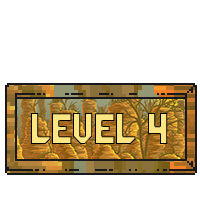
<style>
.page{position:relative;width:200px;height:200px;background:#ffffff}
.page>*{position:absolute;margin:0}
.t1{font:34.9px "GalacticaGridRegular";color:#fce583;scale:0.97 1}
</style>
<div class="page">
<p class="t1" style="left:31px;top:113px;width:137px;height:31px">Level 4</p>
</div>
